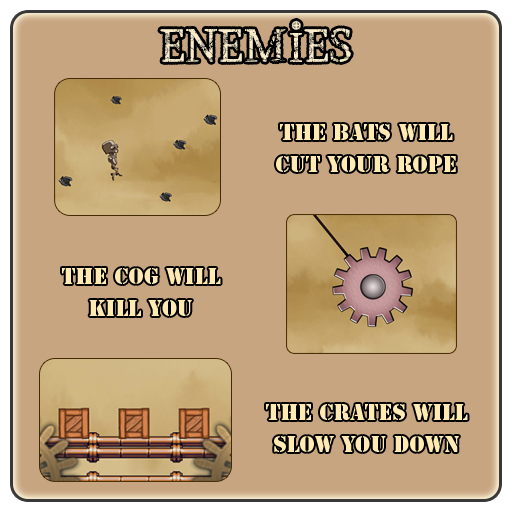
<style>
.page{position:relative;width:512px;height:512px;background:#c8a581}
.page>*{position:absolute;margin:0}
.t1{font:50px "SteampunkbyMartavanEck";letter-spacing:0.01em;color:#f9eccb}
.t2{font:21px/32px "StencilStd";letter-spacing:0.01em;color:#feeab2}
</style>
<div class="page">
<p class="t1" style="left:160px;top:20px;width:191px;height:42px">ENEMIES</p>
<p class="t2" style="left:276px;top:124px;width:180px;height:48px;text-align:center">the bats will cut your rope</p>
<p class="t2" style="left:62px;top:268px;width:159px;height:48px;text-align:center">the cog will kill you</p>
<p class="t2" style="left:266px;top:404px;width:202px;height:48px;text-align:center">the crates will slow you down</p>
</div>
